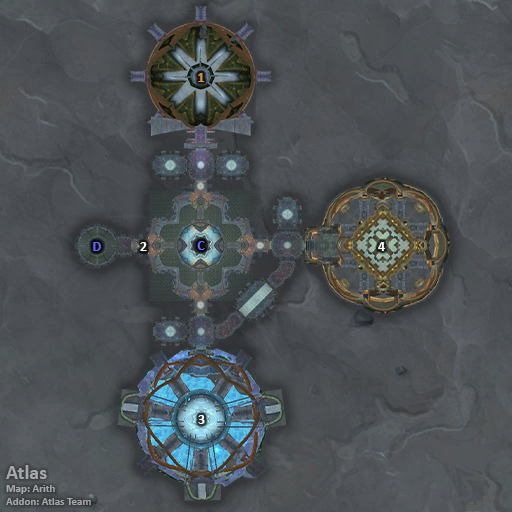
<style>
.page{position:relative;width:512px;height:512px}
.page>*{position:absolute;margin:0}
.t1{font:14px "Calibri-Bold";color:#cc9933}
.t2{font:14px "Calibri-Bold";color:#6666ff}
.t3{font:14px "Calibri-Bold";color:#ffffff}
.t4{font:11px "Calibri-Bold";color:#a5a6a8}
.t5{font:20px "Calibri-Bold";color:#a5a6a8}
</style>
<div class="page">
<p class="t1" style="left:198px;top:73px;width:6px;height:9px">1</p>
<p class="t2" style="left:93px;top:242px;width:8px;height:9px">D</p>
<p class="t3" style="left:140px;top:242px;width:7px;height:9px">2</p>
<p class="t2" style="left:197px;top:241px;width:8px;height:9px">C</p>
<p class="t3" style="left:378px;top:242px;width:7px;height:9px">4</p>
<p class="t3" style="left:198px;top:415px;width:7px;height:9px">3</p>
<p class="t4" style="left:6px;top:465px;width:85px;height:40px"><span class="t5">Atlas<br></span>Map: Arith<br>Addon: Atlas Team</p>
</div>
